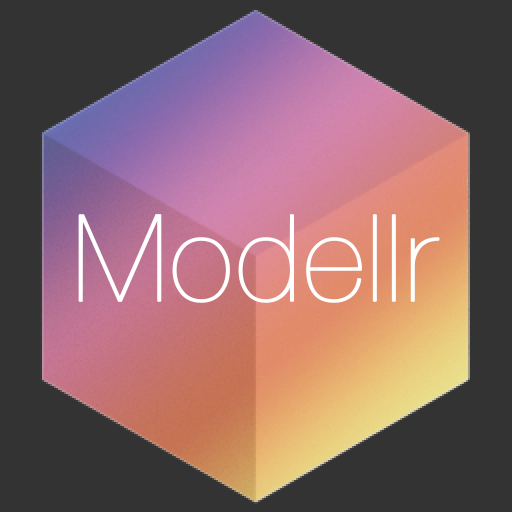
<style>
.page{position:relative;width:512px;height:512px;background:#333333}
.page>*{position:absolute;margin:0}
.t1{font:120.4px "HelveticaNeue-Regular";color:#ffffff;font-weight:bold}
</style>
<div class="page">
<p class="t1" style="left:78px;top:214px;width:362px;height:89px">Modellr</p>
</div>
